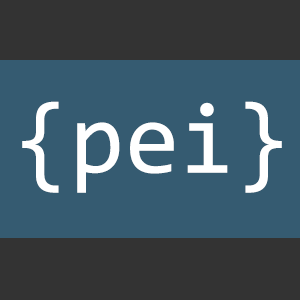
<style>
.page{position:relative;width:300px;height:300px;background:#355b71}
.page>*{position:absolute;margin:0}
.t1{font:100px "Consolas";color:#ffffff}
</style>
<div class="page">
<p class="t1" style="left:22px;top:101px;width:260px;height:92px">{pei}</p>
</div>
